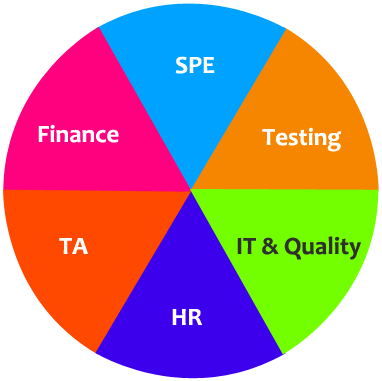
<style>
.page{position:relative;width:382px;height:381px;background:#ffffff}
.page>*{position:absolute;margin:0}
.t1{font:25px "Candara-Bold";color:#ffffff}
.t2{font:25px "Candara-Bold";color:#2f2f2f}
</style>
<div class="page">
<p class="t1" style="left:175px;top:56px;width:40px;height:18px">SPE</p>
<p class="t1" style="left:38px;top:124px;width:81px;height:19px">Finance</p>
<p class="t1" style="left:262px;top:127px;width:80px;height:25px">Testing</p>
<p class="t1" style="left:59px;top:238px;width:29px;height:16px">TA</p>
<p class="t2" style="left:237px;top:236px;width:124px;height:24px">IT &amp; Quality</p>
<p class="t1" style="left:172px;top:309px;width:30px;height:16px">HR</p>
</div>
